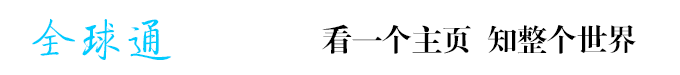
<style>
.page{position:relative;width:680px;height:75px;background:#ffffff}
.page>*{position:absolute;margin:0}
.t1{font:48px "JQiTi";color:#00ccff}
.t2{font:30px "FZXBSK--GBK1-0";color:#000000}
</style>
<div class="page">
<p class="t1" style="left:32px;top:18px;width:140px;height:42px">全球通</p>
<p class="t2" style="left:322px;top:24px;width:314px;height:30px">看一个主页  知整个世界</p>
</div>
